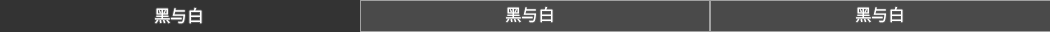
<style>
.page{position:relative;width:1050px;height:32px;background:#4a4a4a}
.page>*{position:absolute;margin:0}
.t1{font:16.7px "SourceHanSansSC-Normal";color:#ffffff}
</style>
<div class="page">
<p class="t1" style="left:506px;top:6px;width:47px;height:17px">黑与白</p>
<p class="t1" style="left:856px;top:6px;width:47px;height:17px">黑与白</p>
<p class="t1" style="left:155px;top:7px;width:47px;height:17px">黑与白</p>
</div>
